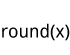
<style>
.page{position:relative;width:70px;height:55px;background:#ffffff}
.page>*{position:absolute;margin:0}
.t1{font:18px "DroidSans";color:#000000}
</style>
<div class="page">
<p class="t1" style="left:2px;top:23px;width:68px;height:18px">round(x)</p>
</div>
